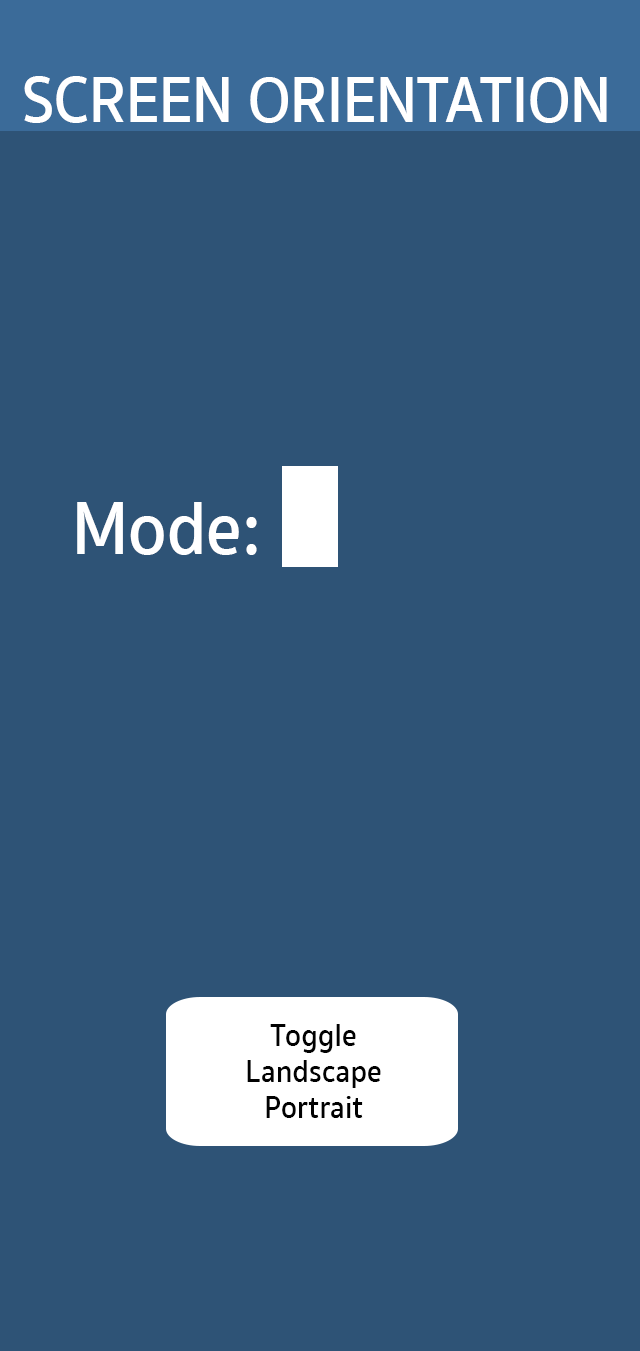
<style>
.page{position:relative;width:640px;height:1351px;background:#2e5376}
.page>*{position:absolute;margin:0}
.t1{font:66.6px "SukhumvitSet-SemiBold";color:#ffffff;scale:0.91 1}
.t2{font:76.6px "SukhumvitSet-SemiBold";color:#ffffff;scale:0.91 1}
.t3{font:32.2px/36px "SukhumvitSet-SemiBold";color:#010101;scale:0.91 1}
</style>
<div class="page">
<p class="t1" style="left:24px;top:76px;width:583px;height:47px">SCREEN ORIENTATION</p>
<p class="t2" style="left:77px;top:502px;width:180px;height:53px">Mode:</p>
<p class="t3" style="left:247px;top:1024px;width:134px;height:94px;text-align:center">Toggle<br>Landscape<br>Portrait</p>
</div>
